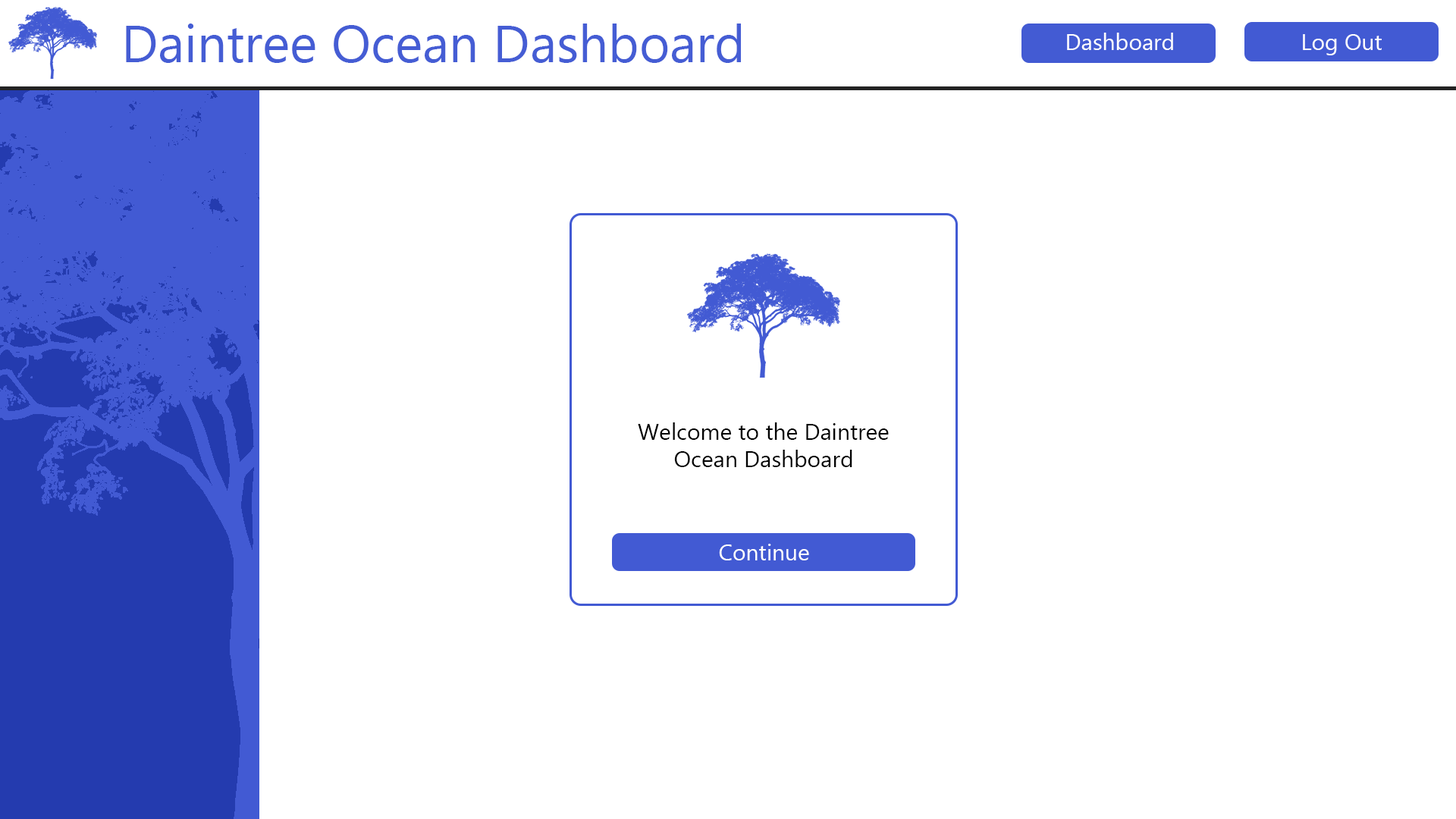
<style>
.page{position:relative;width:1456px;height:819px;background:#ffffff}
.page>*{position:absolute;margin:0}
.t1{font:52.3px "MyanmarText";color:#455dd4}
.t2{font:22.7px "MyanmarText";color:#ffffff}
.t3{font:22.7px "MyanmarText";color:#000000}
.t4{font:4.5px "MyanmarText";color:#656568}
</style>
<div class="page">
<p class="t1" style="left:126px;top:24px;width:615px;height:39px">Daintree Ocean Dashboard</p>
<p class="t2" style="left:1067px;top:33px;width:106px;height:17px">Dashboard</p>
<p class="t2" style="left:1303px;top:34px;width:79px;height:21px">Log Out</p>
<p class="t3" style="left:638px;top:422px;width:251px;height:45px;text-align:center"><span class="t4"><br></span>Welcome to the Daintree Ocean Dashboard</p>
<p class="t2" style="left:719px;top:544px;width:90px;height:16px">Continue</p>
</div>
